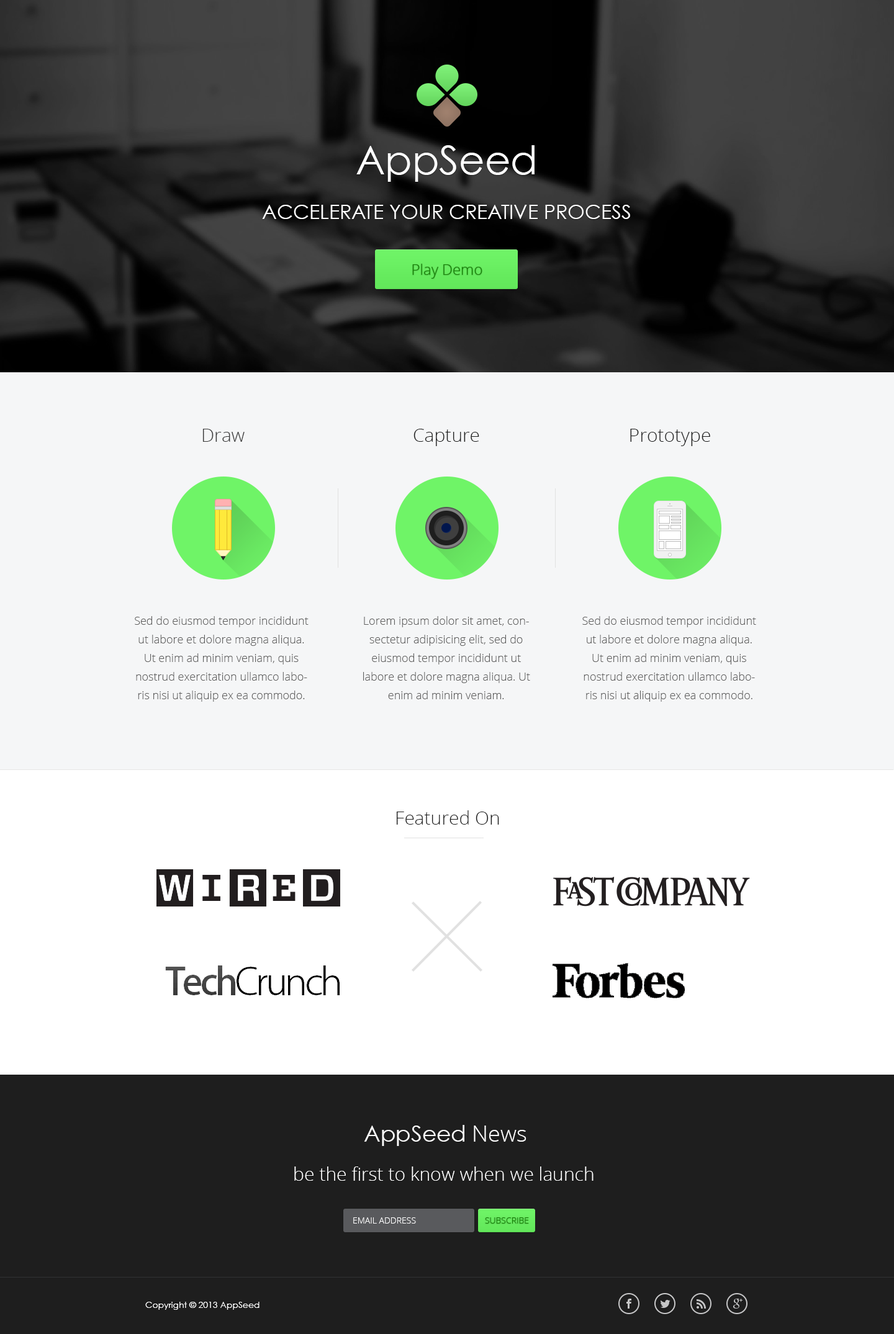
<style>
.page{position:relative;width:894px;height:1334px;background:#f5f6f7}
.page>*{position:absolute;margin:0}
.t1{font:19.9px/44.7px "CenturyGothic";color:#ffffff}
.t2{font:39.7px/44.7px "CenturyGothic";color:#ffffff}
.t3{font:14.9px "OpenSans-Light";color:#158403}
.t4{font:18.6px "OpenSans-Light";color:#3b3b3b}
.t5{font:18.6px "OpenSans-Light";color:#1e1e1e}
.t6{font:11.2px/18.6px "OpenSans-Light";color:#5c5c5c}
.t7{font:22.3px "CenturyGothic";color:#ffffff}
.t8{font:22.3px "OpenSans-Light";color:#ffffff}
.t9{font:18.6px "OpenSans-Light";color:#ffffff}
.t10{font:8.7px "OpenSans-Light";color:#ffffff}
.t11{font:8.7px "OpenSans-Light";color:#158403}
.t12{font:8.7px "CenturyGothic";color:#ffffff}
</style>
<div class="page">
<p class="t1" style="left:262px;top:145px;width:368px;height:74px;text-align:center"><span class="t2">AppSeed<br></span>ACCELERATE YOUR CREATIVE PROCESS</p>
<p class="t3" style="left:412px;top:264px;width:70px;height:15px">Play Demo</p>
<p class="t4" style="left:202px;top:429px;width:43px;height:13px">Draw</p>
<p class="t5" style="left:413px;top:429px;width:66px;height:17px">Capture</p>
<p class="t5" style="left:630px;top:429px;width:80px;height:17px">Prototype</p>
<p class="t6" style="left:135px;top:616px;width:173px;height:86px;text-align:center">Sed do eiusmod tempor incididunt ut labore et dolore magna aliqua. Ut enim ad minim veniam, quis nostrud exercitation ullamco laboris nisi ut aliquip ex ea commodo.</p>
<p class="t6" style="left:363px;top:616px;width:167px;height:83px;text-align:center">Lorem ipsum dolor sit amet, consectetur adipisicing elit, sed do eiusmod tempor incididunt ut labore et dolore magna aliqua. Ut enim ad minim veniam.</p>
<p class="t6" style="left:582px;top:616px;width:174px;height:86px;text-align:center">Sed do eiusmod tempor incididunt ut labore et dolore magna aliqua. Ut enim ad minim veniam, quis nostrud exercitation ullamco laboris nisi ut aliquip ex ea commodo.</p>
<p class="t5" style="left:396px;top:811px;width:103px;height:14px">Featured On</p>
<p class="t7" style="left:364px;top:1125px;width:162px;height:21px">AppSeed <span class="t8">News</span></p>
<p class="t9" style="left:294px;top:1167px;width:299px;height:14px">be the first to know when we launch</p>
<p class="t10" style="left:353px;top:1218px;width:63px;height:6px">EMAIL ADDRESS</p>
<p class="t11" style="left:485px;top:1218px;width:44px;height:6px">SUBSCRIBE</p>
<p class="t12" style="left:145px;top:1302px;width:114px;height:8px">Copyright © 2013 AppSeed</p>
</div>
